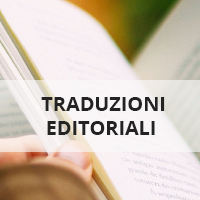
<style>
.page{position:relative;width:200px;height:200px}
.page>*{position:absolute;margin:0}
.t1{font:20px "OpenSans-Bold";letter-spacing:-0.005em;color:#242323;text-transform:uppercase}
</style>
<div class="page">
<p class="t1" style="left:41px;top:97px;width:124px;height:38px;text-align:center">Traduzioni <br>Editoriali</p>
</div>
